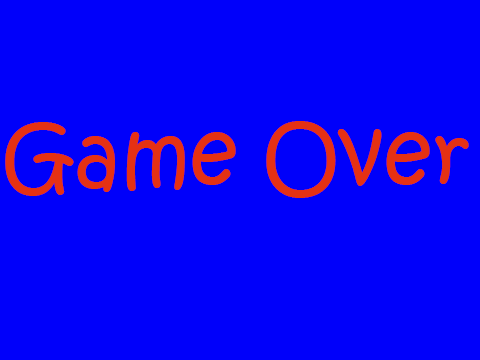
<style>
.page{position:relative;width:480px;height:360px;background:#0000fa}
.page>*{position:absolute;margin:0}
.t1{font:85px "KristenITC-Regular";color:#e53113}
</style>
<div class="page">
<p class="t1" style="left:5px;top:121px;width:464px;height:77px">Game Over</p>
</div>
